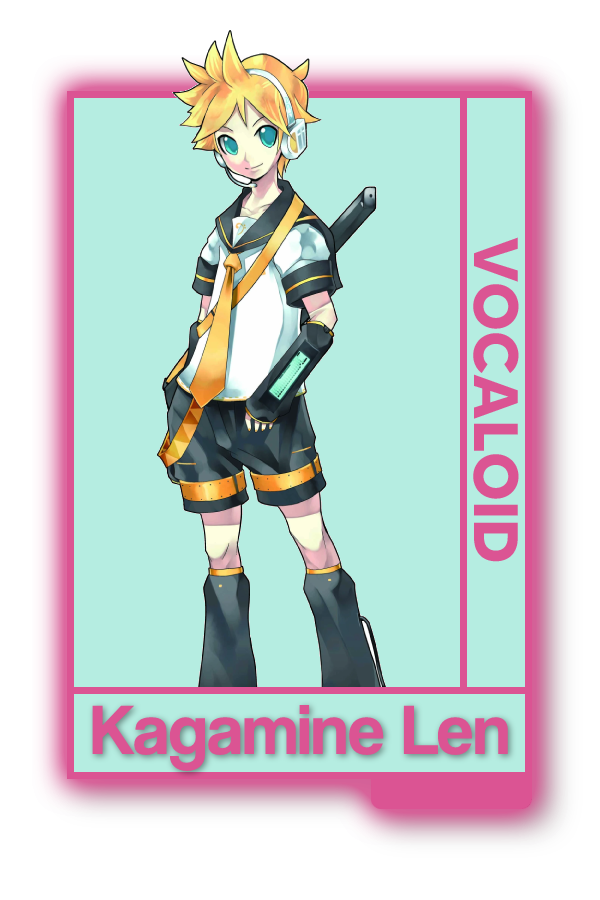
<style>
.page{position:relative;width:600px;height:900px;background:#b5ede1}
.page>*{position:absolute;margin:0}
.t1{font:62.5px "MADETOMMY-Bold";color:#db5493}
.t2{font:72.8px "CoolveticaRg-Regular";color:#db5493}
</style>
<div class="page">
<p class="t1" style="left:473px;top:237px;width:46px;height:325px;rotate:90deg">VOCALOID</p>
<p class="t2" style="left:92px;top:705px;width:416px;height:66px">Kagamine Len</p>
</div>
